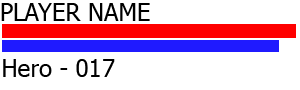
<style>
.page{position:relative;width:300px;height:90px;background:#ffffff}
.page>*{position:absolute;margin:0}
.t1{font:24px "Tahoma";color:#000000}
</style>
<div class="page">
<p class="t1" style="left:1px;top:3px;width:149px;height:18px">PLAYER NAME</p>
<p class="t1" style="left:3px;top:59px;width:112px;height:18px">Hero - 017</p>
</div>
